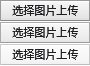
<style>
.page{position:relative;width:90px;height:66px}
.page>*{position:absolute;margin:0}
.t1{font:11px "FZLanTingHei-R";color:#242428}
</style>
<div class="page">
<p class="t1" style="left:12px;top:5px;width:66px;height:11px">选择图片上传</p>
<p class="t1" style="left:12px;top:27px;width:66px;height:11px">选择图片上传</p>
<p class="t1" style="left:12px;top:49px;width:66px;height:11px">选择图片上传</p>
</div>
